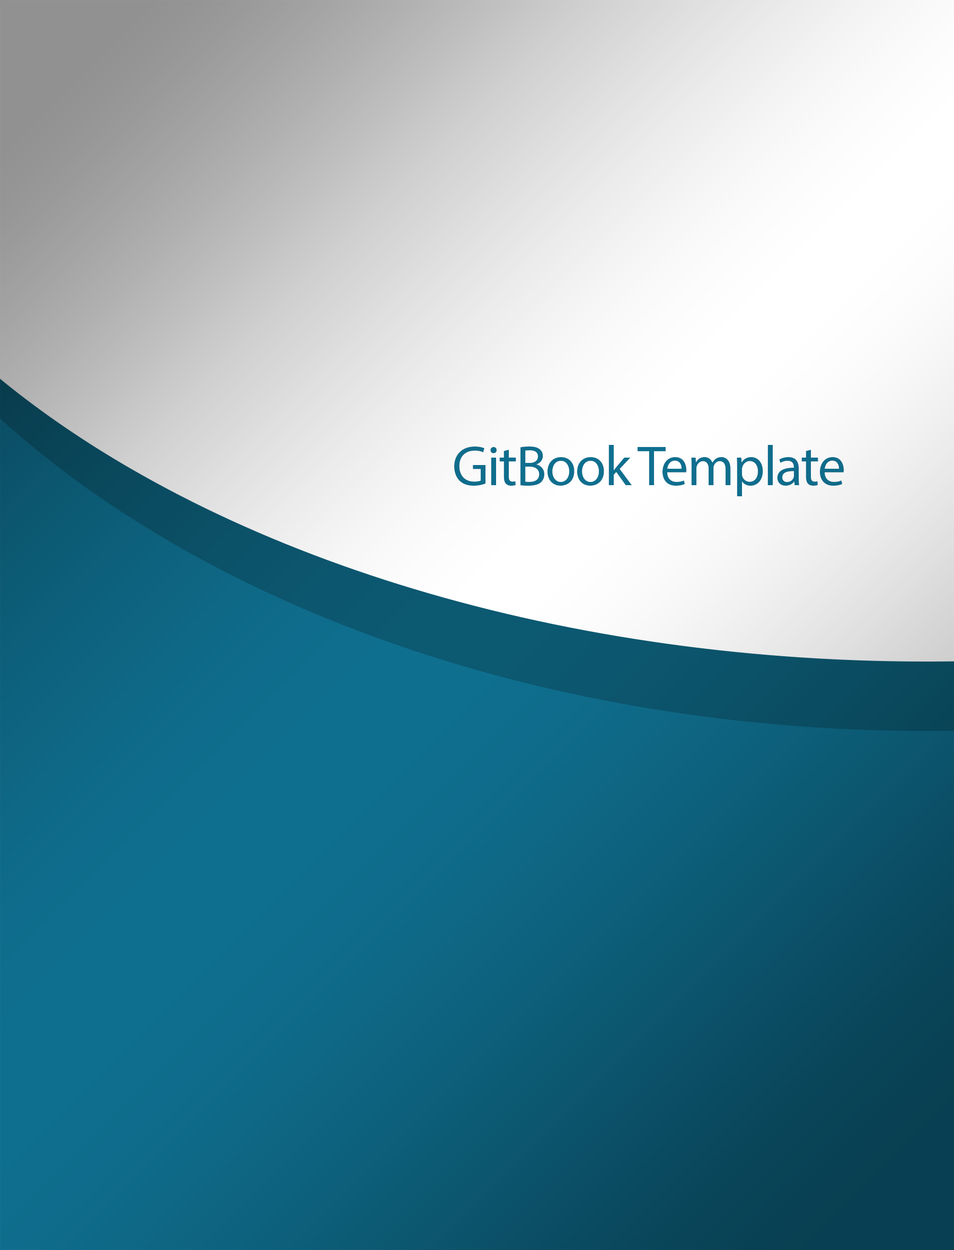
<style>
.page{position:relative;width:954px;height:1250px}
.page>*{position:absolute;margin:0}
.t1{font:56.7px "MyriadPro-Regular";letter-spacing:-0.025em;color:#0f6f8f}
</style>
<div class="page">
<p class="t1" style="left:454px;top:445px;width:389px;height:51px">GitBook Template</p>
</div>
